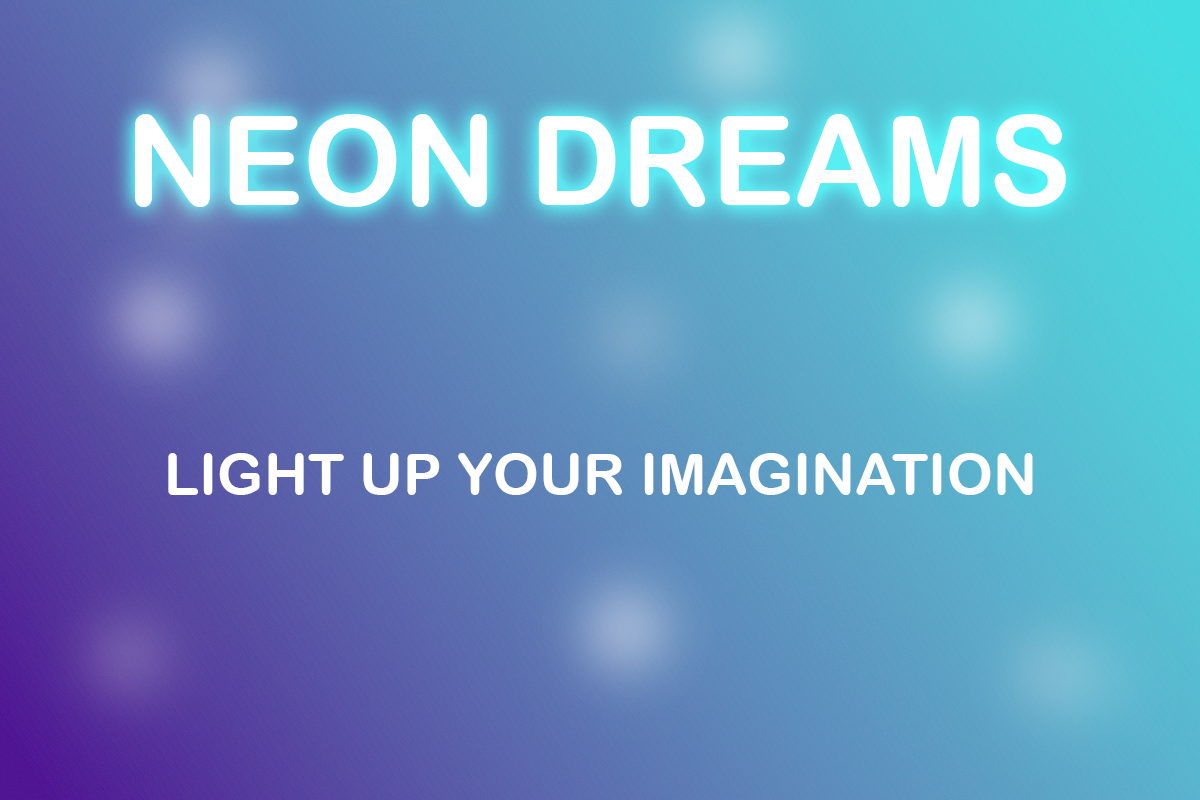
<style>
.page{position:relative;width:1200px;height:800px}
.page>*{position:absolute;margin:0}
.t1{font:125px "ArialRoundedMTBold";color:#ffffff}
.t2{font:58.3px "ArialRoundedMTBold";color:#ffffff}
</style>
<div class="page">
<p class="t1" style="left:135px;top:114px;width:931px;height:93px">NEON DREAMS</p>
<p class="t2" style="left:168px;top:453px;width:865px;height:42px">LIGHT UP YOUR IMAGINATION</p>
</div>
